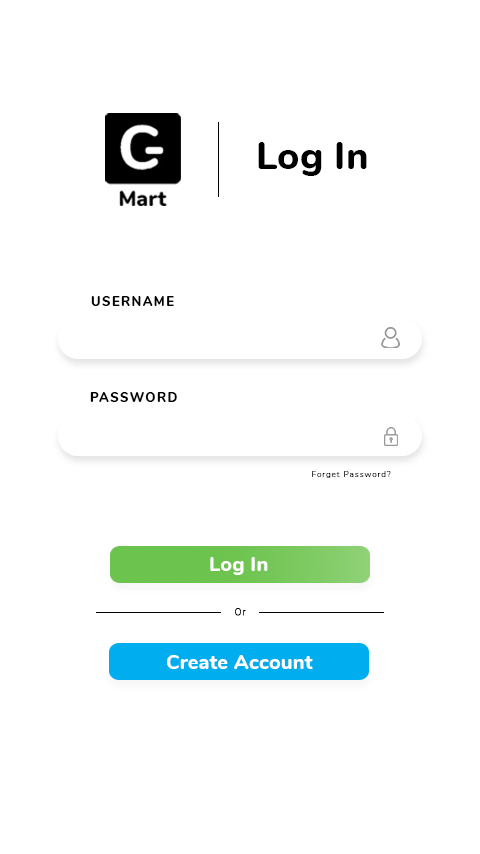
<style>
.page{position:relative;width:480px;height:854px;background:#ffffff}
.page>*{position:absolute;margin:0}
.t1{font:38px "Nunito-ExtraBold";letter-spacing:0.005em;color:#000000}
.t2{font:13.1px "Nunito-ExtraBold";letter-spacing:0.105em;color:#000000}
.t3{font:8.1px "Nunito-ExtraLight";letter-spacing:0.105em;color:#000000;font-weight:bold}
.t4{font:20.1px "Nunito-ExtraBold";letter-spacing:0.005em;color:#ffffff}
.t5{font:9.1px "Nunito-ExtraLight";letter-spacing:0.105em;color:#000000;font-weight:bold}
</style>
<div class="page">
<p class="t1" style="left:258px;top:142px;width:109px;height:34px">Log In</p>
<p class="t2" style="left:91px;top:296px;width:83px;height:10px">USERNAME</p>
<p class="t2" style="left:90px;top:392px;width:87px;height:10px">PASSWORD</p>
<p class="t3" style="left:312px;top:471px;width:79px;height:7px">Forget Password?</p>
<p class="t4" style="left:210px;top:557px;width:58px;height:18px">Log In</p>
<p class="t5" style="left:235px;top:608px;width:11px;height:8px">Or</p>
<p class="t4" style="left:167px;top:655px;width:146px;height:14px">Create Account</p>
</div>
